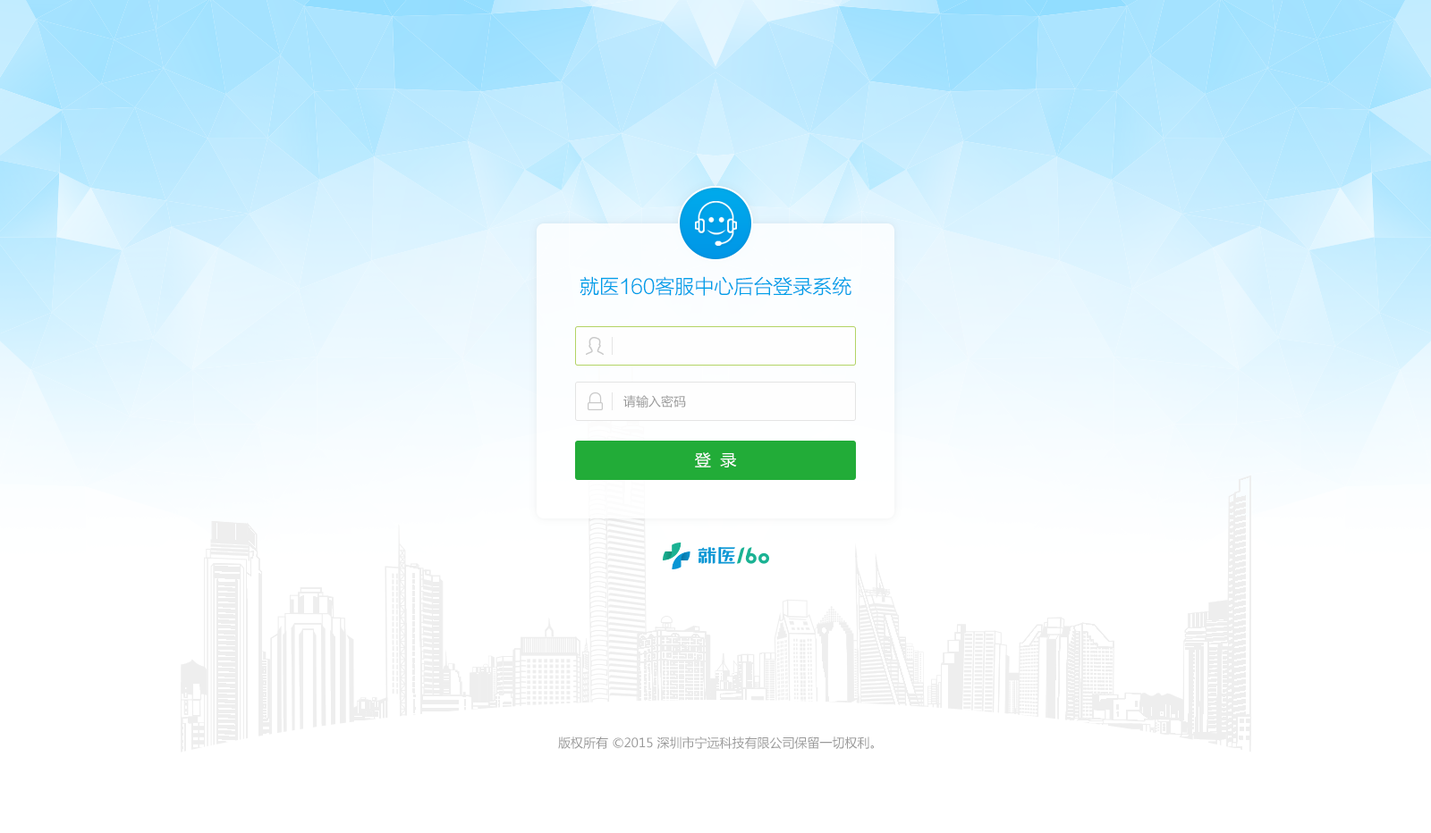
<style>
.page{position:relative;width:1431px;height:833px;background:#ffffff}
.page>*{position:absolute;margin:0}
.t1{font:19.7px "FZLTXHK--GBK1-0";color:#00a0e9}
.t2{font:12.5px "MicrosoftYaHei";color:#999999}
.t3{font:16.1px "MicrosoftYaHei";color:#ffffff}
</style>
<div class="page">
<p class="t1" style="left:579px;top:276px;width:272px;height:20px">就医160客服中心后台登录系统</p>
<p class="t2" style="left:623px;top:395px;width:63px;height:13px">请输入密码</p>
<p class="t3" style="left:695px;top:452px;width:42px;height:16px">登  录</p>
<p class="t2" style="left:558px;top:737px;width:316px;height:12px">版权所有 ©2015 深圳市宁远科技有限公司保留一切权利。</p>
</div>
